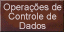
<style>
.page{position:relative;width:64px;height:32px;background:#633121}
.page>*{position:absolute;margin:0}
.t1{font:9.3px/9.3px "ArialMT";color:#decece}
</style>
<div class="page">
<p class="t1" style="left:3px;top:3px;width:59px;height:26px;text-align:center">Operações de<br>Controle de<br>Dados</p>
</div>
